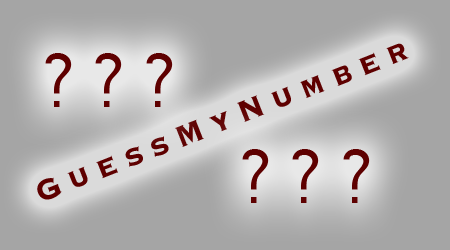
<style>
.page{position:relative;width:450px;height:250px;background:#a5a5a5}
.page>*{position:absolute;margin:0}
.t1{font:38.8px "Copperplate-Bold";letter-spacing:0.26em;color:#5e0000;scale:0.88 1}
.t2{font:69.5px "GenevaCY";letter-spacing:0.26em;color:#5e0000;scale:0.88 1}
</style>
<div class="page">
<p class="t1" style="left:37px;top:43px;width:372px;height:157px;rotate:-21deg">GuessMyNumber</p>
<p class="t2" style="left:45px;top:53px;width:128px;height:54px">???</p>
<p class="t2" style="left:242px;top:149px;width:128px;height:54px">???</p>
</div>
